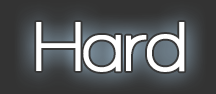
<style>
.page{position:relative;width:216px;height:94px}
.page>*{position:absolute;margin:0}
.t1{font:72px "WalkwayUltraBold";color:#ffffff}
</style>
<div class="page">
<p class="t1" style="left:36px;top:22px;width:149px;height:50px">Hard</p>
</div>
